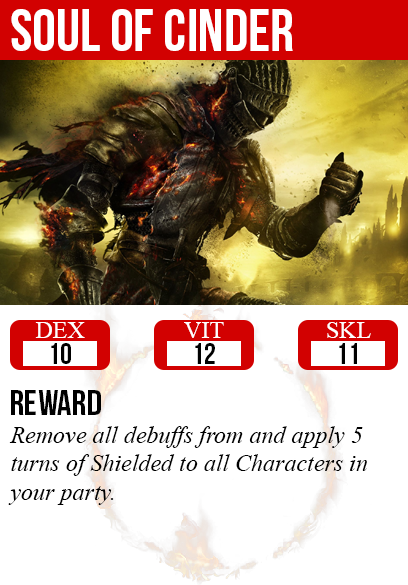
<style>
.page{position:relative;width:408px;height:585px;background:#ffffff}
.page>*{position:absolute;margin:0}
.t1{font:60px "BebasNeue";color:#ffffff}
.t2{font:24px "TimesNewRomanPSMT";color:#ffffff}
.t3{font:30px "BebasNeue";color:#000000}
.t4{font:36px "BebasNeue";color:#000000}
.t5{font:24px "TimesNewRomanPS-ItalicMT";color:#000000}
</style>
<div class="page">
<p class="t1" style="left:11px;top:9px;width:282px;height:42px">soul of cinder</p>
<p class="t2" style="left:35px;top:322px;width:50px;height:16px">DEX</p>
<p class="t2" style="left:184px;top:322px;width:40px;height:16px">VIT</p>
<p class="t2" style="left:327px;top:322px;width:44px;height:16px">SKL</p>
<p class="t3" style="left:51px;top:343px;width:20px;height:21px">10</p>
<p class="t3" style="left:195px;top:343px;width:20px;height:21px">12</p>
<p class="t3" style="left:339px;top:343px;width:18px;height:21px">11</p>
<p class="t4" style="left:11px;top:390px;width:90px;height:25px">reward</p>
<p class="t5" style="left:8px;top:426px;width:359px;height:79px">Remove all debuffs from and apply 5<br>turns of Shielded to all Characters in<br>your party.</p>
</div>
